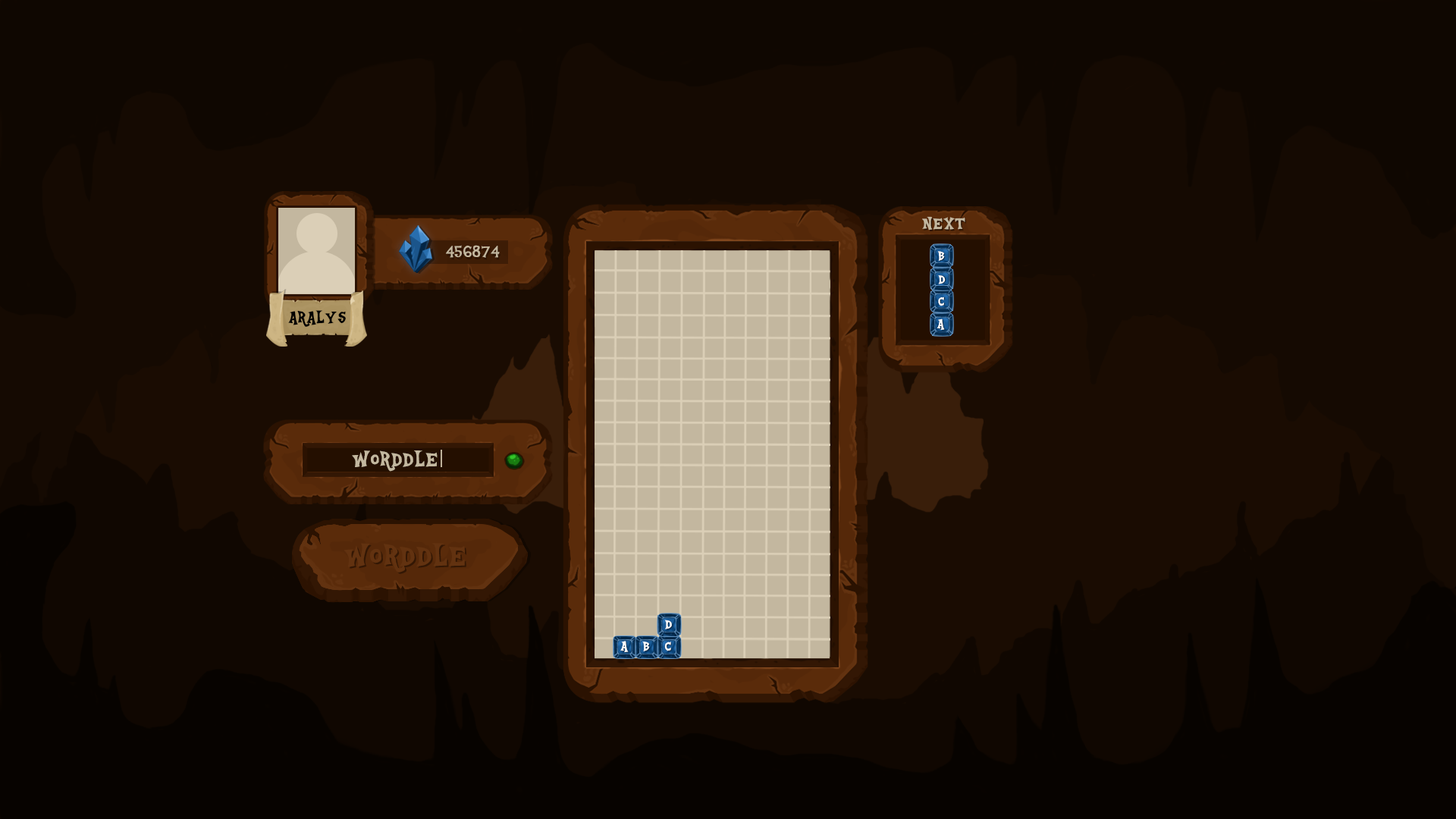
<style>
.page{position:relative;width:1456px;height:819px;background:#150a02}
.page>*{position:absolute;margin:0}
.t1{font:18.6px "Equestria";color:#c3b79f;text-transform:uppercase}
.t2{font:20.3px "Equestria";color:#c3b79f;text-transform:uppercase}
.t3{font:14.6px "Equestria";color:#ffffff;text-transform:uppercase}
.t4{font:14.6px "Equestria";text-transform:uppercase}
.t5{font:18.6px "Equestria";color:#000000;text-transform:uppercase}
.t6{font:23.5px "Equestria";color:#c3b79f;text-transform:uppercase}
.t7{font:33.4px "Equestria";color:#623210;text-transform:uppercase}
.t8{font:14.9px "Equestria";color:#ffffff;text-transform:uppercase}
.t9{font:14.9px "Equestria";text-transform:uppercase}
</style>
<div class="page">
<p class="t1" style="left:922px;top:216px;width:43px;height:15px">NEXT</p>
<p class="t2" style="left:446px;top:245px;width:54px;height:13px">456874</p>
<p class="t3" style="left:937px;top:251px;width:8px;height:10px">B</p>
<p class="t4" style="left:938px;top:252px;width:8px;height:10px">B</p>
<p class="t3" style="left:938px;top:275px;width:8px;height:9px">D</p>
<p class="t3" style="left:938px;top:297px;width:6px;height:9px">C</p>
<p class="t4" style="left:939px;top:297px;width:7px;height:9px">C</p>
<p class="t5" style="left:288px;top:310px;width:58px;height:17px">Aralys</p>
<p class="t3" style="left:937px;top:318px;width:8px;height:12px">A</p>
<p class="t6" style="left:352px;top:450px;width:86px;height:22px">Worddle</p>
<p class="t7" style="left:344px;top:543px;width:121px;height:30px">Worddle</p>
<p class="t8" style="left:665px;top:620px;width:7px;height:9px">D</p>
<p class="t8" style="left:620px;top:641px;width:9px;height:11px">A</p>
<p class="t9" style="left:621px;top:642px;width:8px;height:11px">A</p>
<p class="t8" style="left:642px;top:642px;width:8px;height:9px">B</p>
<p class="t8" style="left:664px;top:642px;width:7px;height:9px">C</p>
<p class="t9" style="left:665px;top:642px;width:7px;height:10px">C</p>
</div>
